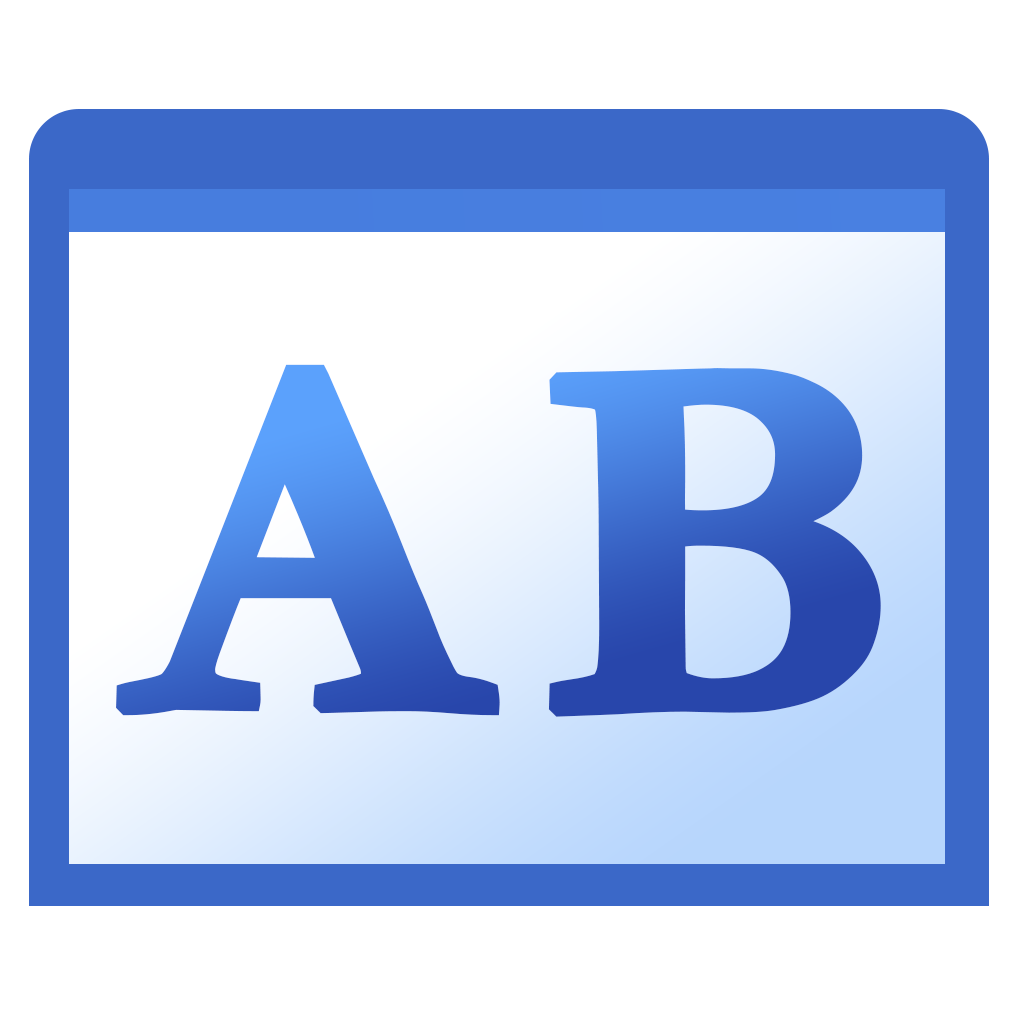
<style>
.page{position:relative;width:1024px;height:1024px;background:#ffffff}
.page>*{position:absolute;margin:0}
.t1{font:520.8px "Garamond-Bold";letter-spacing:0.075em;font-weight:bold;scale:1.03 1}
</style>
<div class="page">
<p class="t1" style="left:116px;top:364px;width:765px;height:353px">AB</p>
</div>
